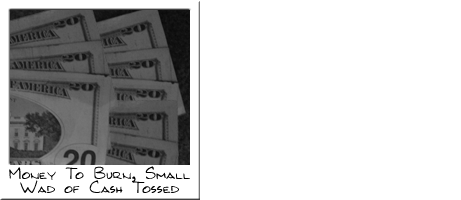
<style>
.page{position:relative;width:461px;height:200px;background:#ffffff}
.page>*{position:absolute;margin:0}
.t1{font:18px/14px "Kilroy-WasHere";color:#000000}
</style>
<div class="page">
<p class="t1" style="left:9px;top:166px;width:181px;height:27px;text-align:center">Money To Burn, Small<br>Wad of Cash Tossed</p>
</div>
